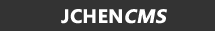
<style>
.page{position:relative;width:215px;height:31px;background:#333333}
.page>*{position:absolute;margin:0}
.t1{font:17.7px "MicrosoftYaHei-Bold";color:#ffffff;font-weight:bold}
.t2{font:17.7px "MicrosoftYaHei-Bold";color:#ffffff;font-weight:bold;font-style:italic}
</style>
<div class="page">
<p class="t1" style="left:61px;top:9px;width:106px;height:15px">JCHEN<span class="t2">CMS</span></p>
</div>
